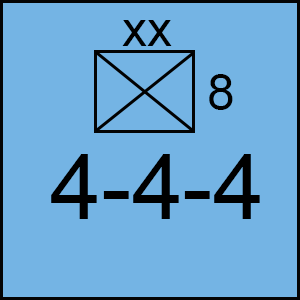
<style>
.page{position:relative;width:300px;height:300px;background:#74b4e4}
.page>*{position:absolute;margin:0}
.t1{font:50px "ArialMT";color:#000000}
.t2{font:91.7px "ArialMT";color:#000000}
</style>
<div class="page">
<p class="t1" style="left:122px;top:20px;width:50px;height:26px">xx</p>
<p class="t1" style="left:209px;top:74px;width:24px;height:36px">8</p>
<p class="t2" style="left:51px;top:154px;width:209px;height:65px">4-4-4</p>
</div>
